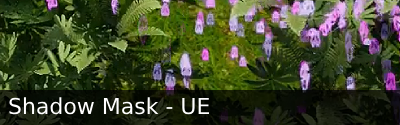
<style>
.page{position:relative;width:400px;height:125px}
.page>*{position:absolute;margin:0}
.t1{font:22px "DejaVuSans";color:#ffffff}
</style>
<div class="page">
<p class="t1" style="left:9px;top:97px;width:200px;height:18px">Shadow Mask - UE</p>
</div>
